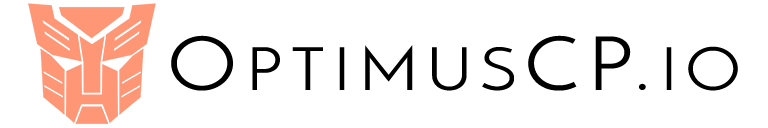
<style>
.page{position:relative;width:768px;height:128px;background:#ffffff}
.page>*{position:absolute;margin:0}
.t1{font:60px "JosefinSans";letter-spacing:0.1em;color:#000000;scale:1.13 1}
.t2{font:75px "JosefinSans";letter-spacing:0.1em;color:#000000;scale:1.13 1}
</style>
<div class="page">
<p class="t1" style="left:171px;top:35px;width:567px;height:56px"><span class="t2">O</span>PTIMUS<span class="t2">CP.</span>IO</p>
</div>
